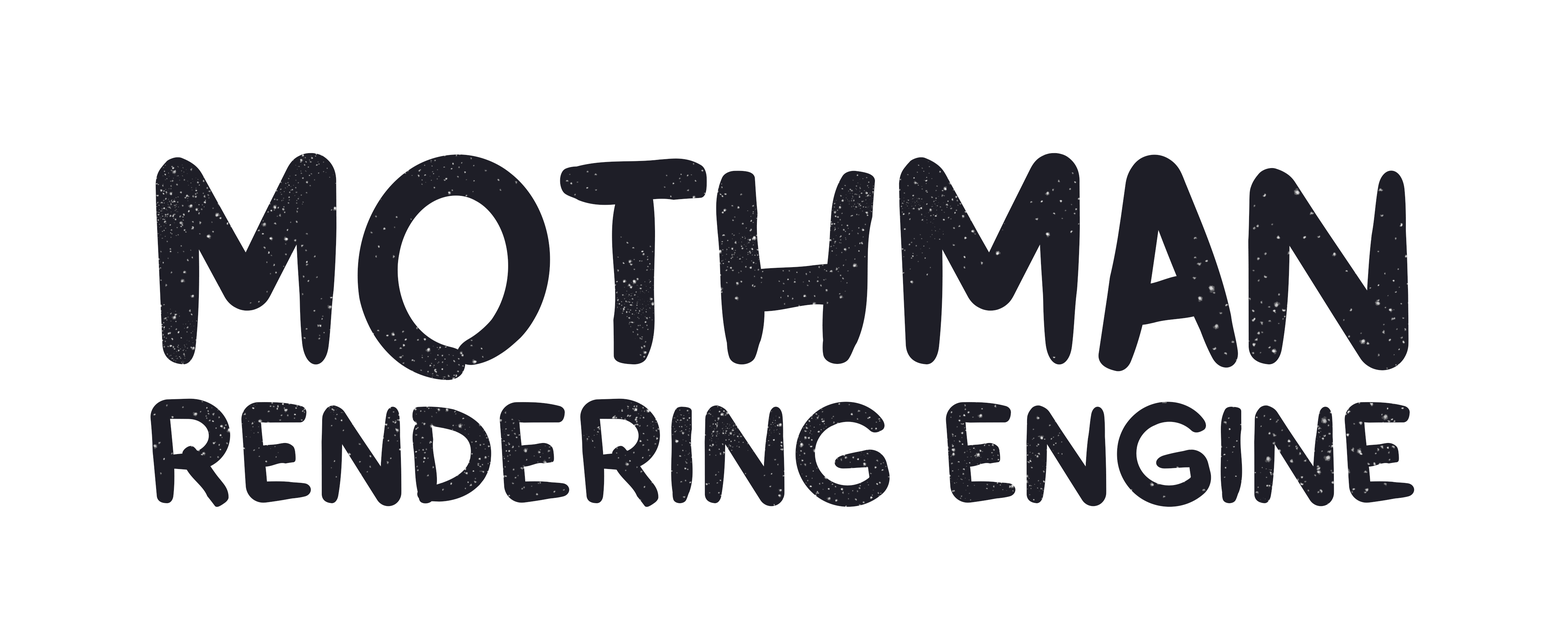
<style>
.page{position:relative;width:1568px;height:641px;background:#ffffff}
.page>*{position:absolute;margin:0}
.t1{font:140.1px/139.3px "GhusrakRegular";color:#1e1e27;font-weight:bold}
.t2{font:281.2px/139.3px "GhusrakRegular";color:#1e1e27;font-weight:bold}
</style>
<div class="page">
<p class="t1" style="left:150px;top:153px;width:1264px;height:354px"><span class="t2">MOTHMAN<br></span>RENDERING ENGINE</p>
</div>
